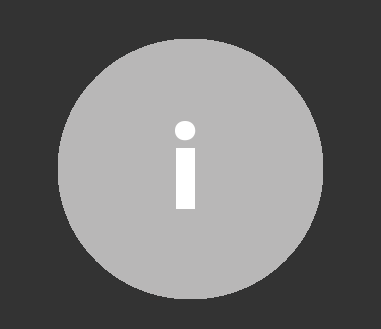
<style>
.page{position:relative;width:381px;height:329px;background:#333333}
.page>*{position:absolute;margin:0}
.t1{font:125px "MyriadPro-Bold";color:#ffffff}
</style>
<div class="page">
<p class="t1" style="left:175px;top:121px;width:21px;height:88px">i</p>
</div>
